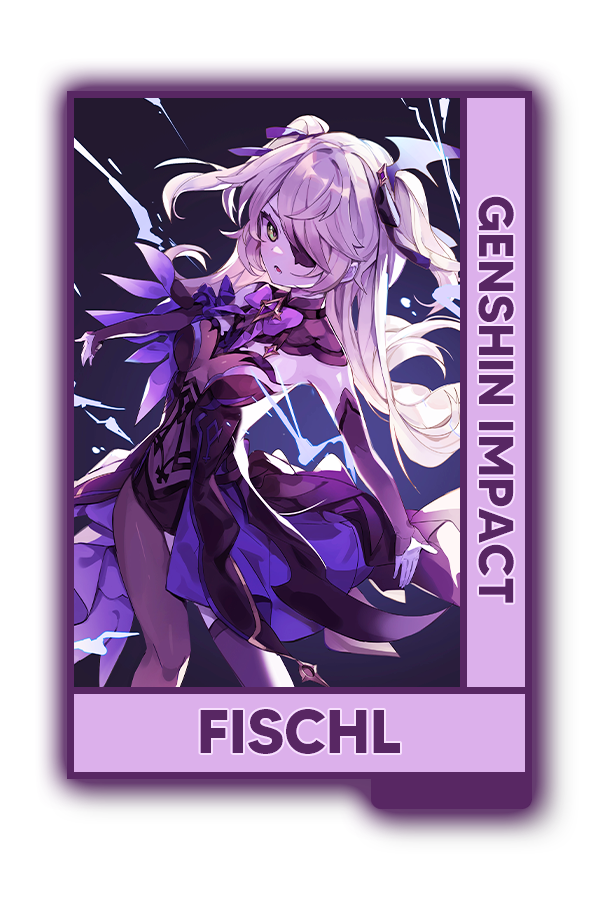
<style>
.page{position:relative;width:600px;height:900px;background:#ffffff}
.page>*{position:absolute;margin:0}
.t1{font:48.8px "MADETOMMY-Bold";color:#482d50}
.t2{font:61.5px "MADETOMMY-Bold";color:#482d50}
</style>
<div class="page">
<p class="t1" style="left:478px;top:196px;width:36px;height:407px;rotate:90deg">GENSHIN IMPACT</p>
<p class="t2" style="left:200px;top:709px;width:200px;height:45px">FISCHL</p>
</div>
